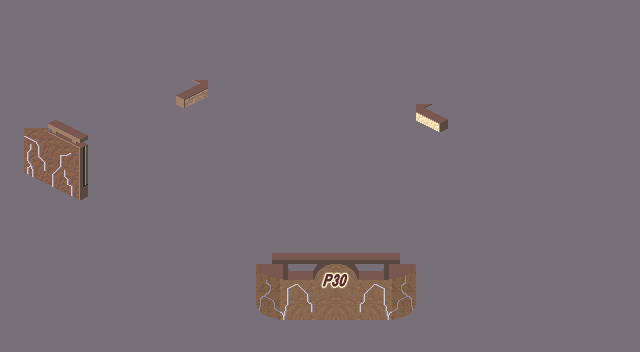
<style>
.page{position:relative;width:640px;height:352px;background:#787078}
.page>*{position:absolute;margin:0}
.t1{font:16.7px "ArialNarrow-BoldItalic";color:#5a2929;font-weight:bold;font-style:italic;scale:0.9 1}
</style>
<div class="page">
<p class="t1" style="left:322px;top:274px;width:26px;height:13px">P30</p>
<p class="t1" style="left:322px;top:274px;width:26px;height:13px">P30</p>
</div>
